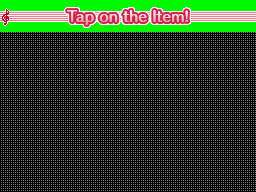
<style>
.page{position:relative;width:256px;height:192px;background:#000000}
.page>*{position:absolute;margin:0}
.t1{font:13.3px "HummingStd-B";letter-spacing:0.025em}
.t2{font:14px "HummingStd-B";letter-spacing:0.025em;scale:0.95 1}
</style>
<div class="page">
<p class="t1" style="left:67px;top:10px;width:122px;height:15px"><span class="t2">T</span>ap on the ltem!</p>
</div>
